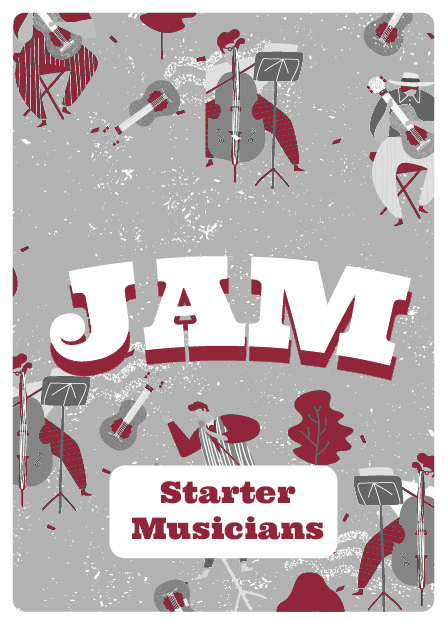
<style>
.page{position:relative;width:448px;height:623px;background:#b3b3b3}
.page>*{position:absolute;margin:0}
.t1{font:30px "Ultra-Regular";color:#91263a}
</style>
<div class="page">
<p class="t1" style="left:132px;top:481px;width:192px;height:59px;text-align:center">Starter<br>Musicians</p>
</div>
